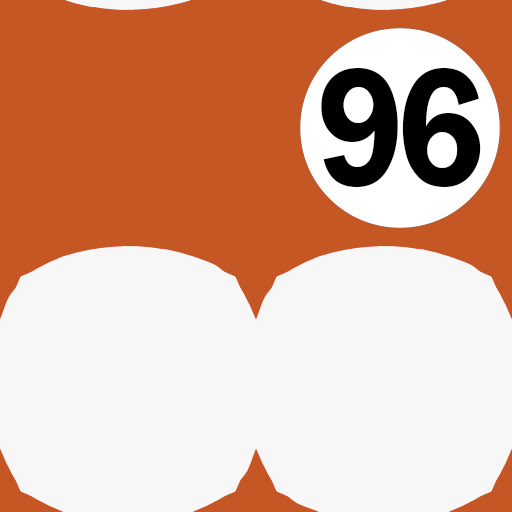
<style>
.page{position:relative;width:512px;height:512px;background:#f7f7f7}
.page>*{position:absolute;margin:0}
.t1{font:172.5px "FranklinGothic-Demi";letter-spacing:-0.05em;color:#010101;scale:0.87 1}
</style>
<div class="page">
<p class="t1" style="left:321px;top:68px;width:160px;height:119px">96</p>
</div>
